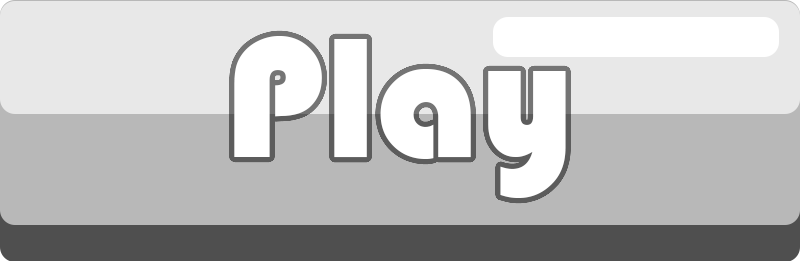
<style>
.page{position:relative;width:800px;height:261px;background:#b8b8b8}
.page>*{position:absolute;margin:0}
.t1{font:177px "Bauhaus93";color:#ffffff}
</style>
<div class="page">
<p class="t1" style="left:234px;top:36px;width:332px;height:162px">Play</p>
</div>
